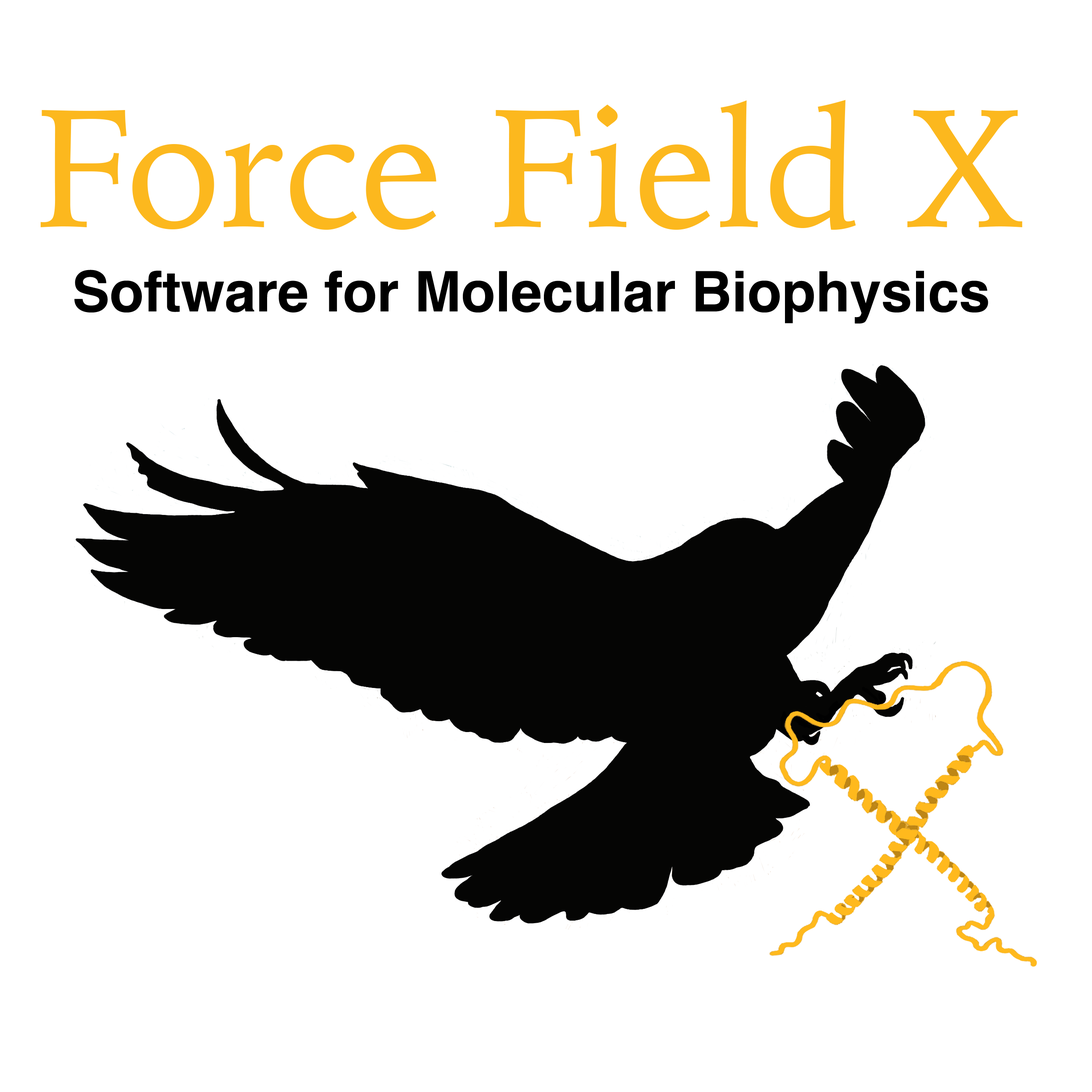
<style>
.page{position:relative;width:1092px;height:1092px;background:#ffffff}
.page>*{position:absolute;margin:0}
.t1{font:168px "IowanOldStyle-Roman";color:#fcb81e}
.t2{font:56px "Helvetica-Bold";color:#000000}
</style>
<div class="page">
<p class="t1" style="left:40px;top:100px;width:982px;height:130px">Force Field X</p>
<p class="t2" style="left:74px;top:270px;width:914px;height:54px">Software for Molecular Biophysics</p>
</div>
